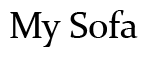
<style>
.page{position:relative;width:146px;height:58px;background:#ffffff}
.page>*{position:absolute;margin:0}
.t1{font:37.5px "Constantia";color:#000000}
</style>
<div class="page">
<p class="t1" style="left:10px;top:10px;width:128px;height:37px">My Sofa</p>
</div>
